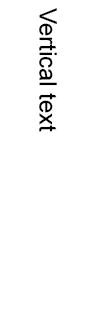
<style>
.page{position:relative;width:96px;height:320px;background:#ffffff}
.page>*{position:absolute;margin:0}
.t1{font:24px "ArialMT";color:#000000}
</style>
<div class="page">
<p class="t1" style="left:39px;top:8px;width:18px;height:124px">Vertical text</p>
</div>
